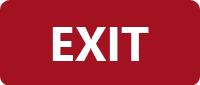
<style>
.page{position:relative;width:200px;height:85px;background:#a21220}
.page>*{position:absolute;margin:0}
.t1{font:48px "SegoeUI-Bold";color:#feffff}
</style>
<div class="page">
<p class="t1" style="left:52px;top:27px;width:97px;height:34px">EXIT</p>
</div>
